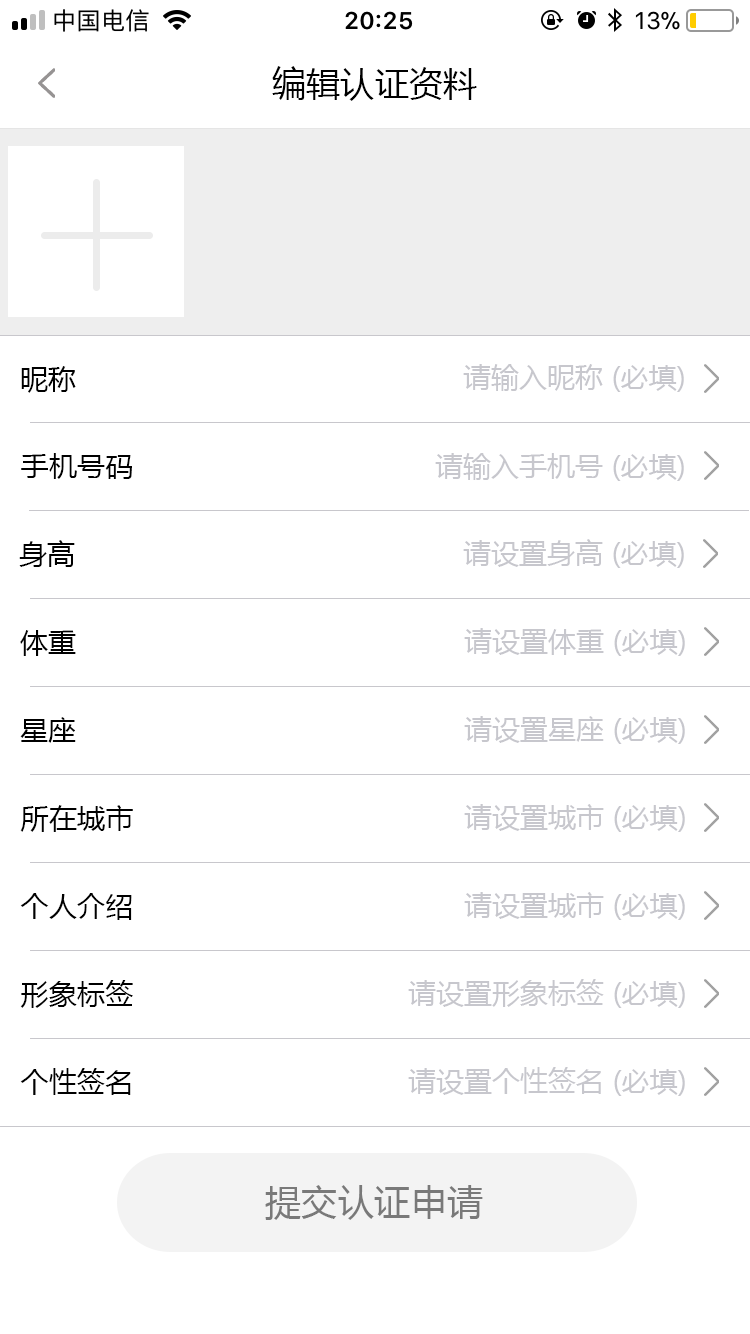
<style>
.page{position:relative;width:750px;height:1334px;background:#ffffff}
.page>*{position:absolute;margin:0}
.t1{font:34px "MicrosoftYaHei";letter-spacing:0.01em;color:#000000}
.t2{font:28px "MicrosoftYaHei";letter-spacing:0.01em;color:#000000}
.t3{font:28px "MicrosoftYaHei";color:#c7c7cd}
.t4{font:36px "MicrosoftYaHei";letter-spacing:0.01em;color:#797979}
</style>
<div class="page">
<p class="t1" style="left:272px;top:66px;width:205px;height:35px">编辑认证资料</p>
<p class="t2" style="left:21px;top:366px;width:55px;height:27px">昵称</p>
<p class="t3" style="left:463px;top:364px;width:221px;height:28px">请输入昵称 (必填)</p>
<p class="t2" style="left:21px;top:453px;width:111px;height:26px">手机号码</p>
<p class="t3" style="left:435px;top:453px;width:249px;height:28px">请输入手机号 (必填)</p>
<p class="t2" style="left:19px;top:540px;width:56px;height:27px">身高</p>
<p class="t3" style="left:463px;top:539px;width:221px;height:29px">请设置身高 (必填)</p>
<p class="t2" style="left:20px;top:630px;width:56px;height:26px">体重</p>
<p class="t3" style="left:464px;top:628px;width:221px;height:28px">请设置体重 (必填)</p>
<p class="t2" style="left:20px;top:717px;width:56px;height:26px">星座</p>
<p class="t3" style="left:464px;top:716px;width:221px;height:28px">请设置星座 (必填)</p>
<p class="t2" style="left:20px;top:805px;width:113px;height:27px">所在城市</p>
<p class="t3" style="left:464px;top:804px;width:221px;height:28px">请设置城市 (必填)</p>
<p class="t2" style="left:20px;top:893px;width:112px;height:27px">个人介绍</p>
<p class="t3" style="left:464px;top:892px;width:221px;height:28px">请设置城市 (必填)</p>
<p class="t2" style="left:20px;top:980px;width:113px;height:28px">形象标签</p>
<p class="t3" style="left:408px;top:979px;width:277px;height:29px">请设置形象标签 (必填)</p>
<p class="t2" style="left:20px;top:1068px;width:111px;height:27px">个性签名</p>
<p class="t3" style="left:408px;top:1067px;width:277px;height:29px">请设置个性签名 (必填)</p>
<p class="t4" style="left:265px;top:1185px;width:218px;height:35px">提交认证申请</p>
</div>
